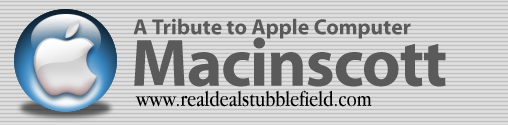
<style>
.page{position:relative;width:508px;height:125px;background:#d9d9d9}
.page>*{position:absolute;margin:0}
.t1{font:21.8px "Myriad-Bold";color:#5a5a5a}
.t2{font:67.5px "Myriad-Bold";letter-spacing:-0.02em;color:#5a5a5a}
.t3{font:22px "AppleGaramond-Book";color:#000000}
</style>
<div class="page">
<p class="t1" style="left:133px;top:18px;width:278px;height:21px">A Tribute to Apple Computer</p>
<p class="t2" style="left:134px;top:37px;width:312px;height:50px">Macinscott</p>
<p class="t3" style="left:135px;top:90px;width:237px;height:17px">www.realdealstubblefield.com</p>
</div>
